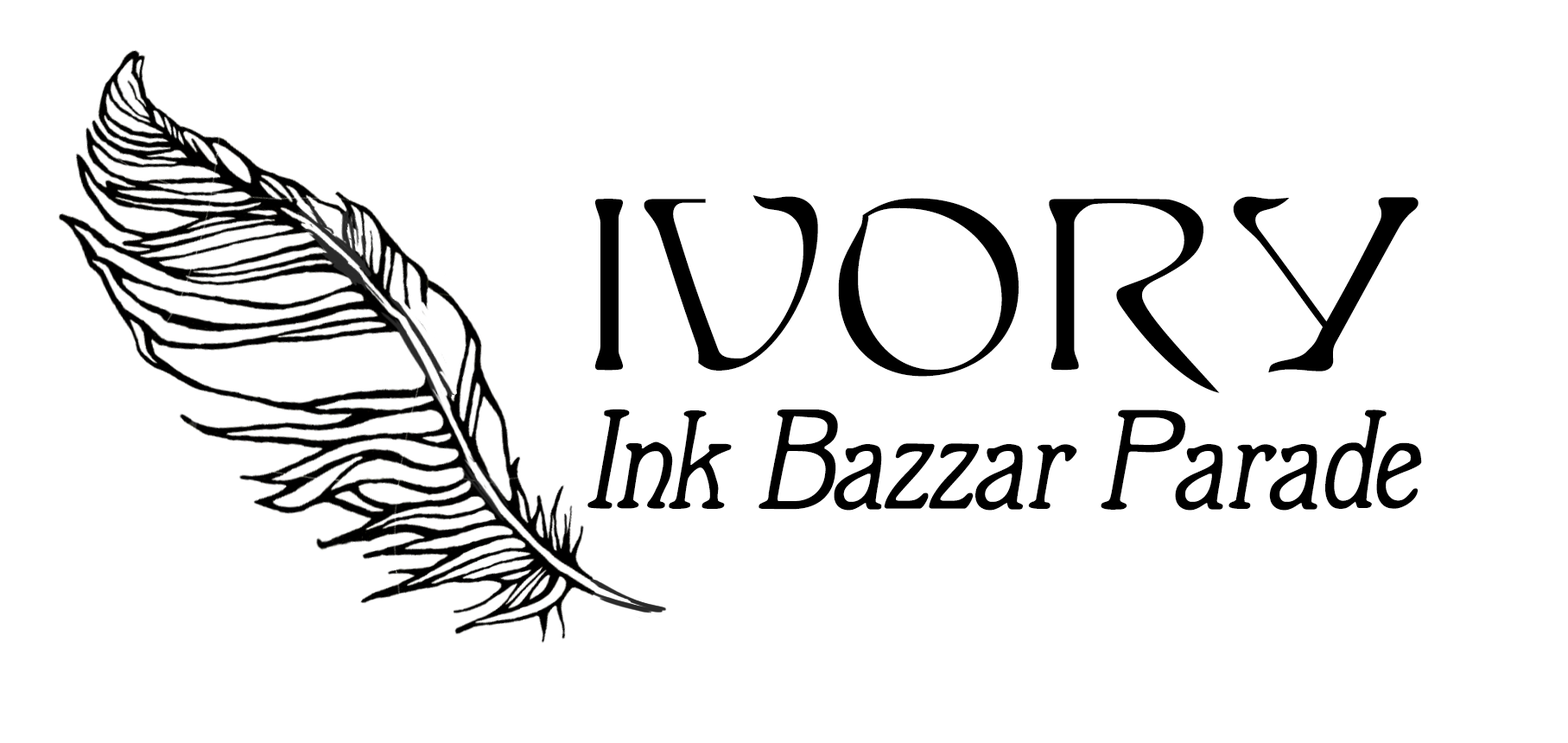
<style>
.page{position:relative;width:1568px;height:743px;background:#ffffff}
.page>*{position:absolute;margin:0}
.t1{font:201.3px "EddaFilled";color:#000000}
.t2{font:137.2px "Berolina";color:#000000;font-style:italic}
</style>
<div class="page">
<p class="t1" style="left:595px;top:195px;width:824px;height:198px">IVORY</p>
<p class="t2" style="left:587px;top:409px;width:835px;height:102px">Ink Bazzar Parade</p>
</div>
